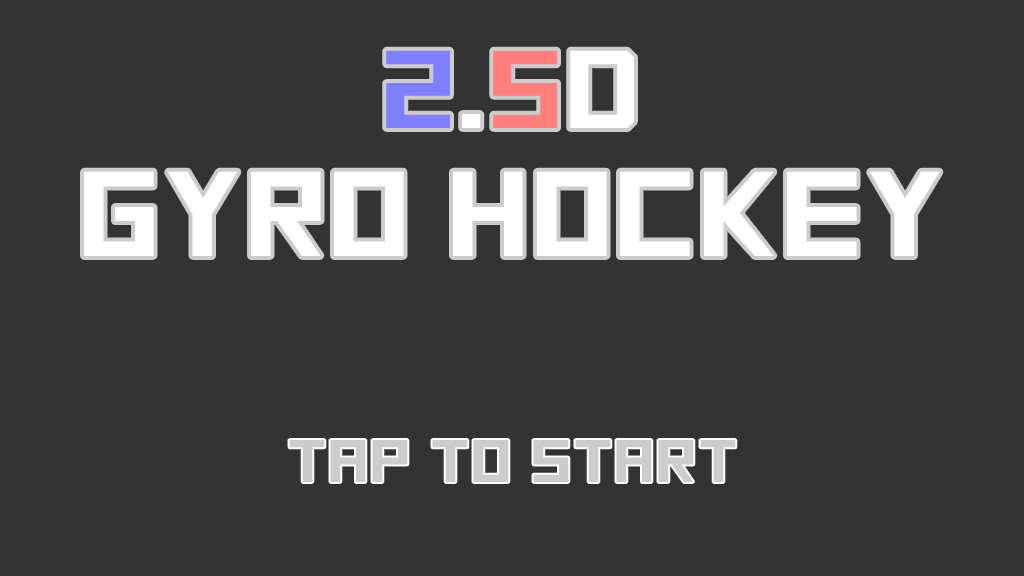
<style>
.page{position:relative;width:1024px;height:576px;background:#333333}
.page>*{position:absolute;margin:0}
.t1{font:110px "SquareFont";color:#7f7fff;scale:1.2 1}
.t2{font:110px "SquareFont";color:#ffffff;scale:1.2 1}
.t3{font:110px "SquareFont";color:#ff7f7f;scale:1.2 1}
.t4{font:120px "SquareFont";color:#ffffff;scale:1.2 1}
.t5{font:60px "SquareFont";color:#cccccc;scale:1.2 1}
</style>
<div class="page">
<p class="t1" style="left:386px;top:50px;width:248px;height:78px">2<span class="t2">.</span><span class="t3">5</span><span class="t2">d</span></p>
<p class="t4" style="left:84px;top:171px;width:856px;height:85px">Gyro hockey</p>
<p class="t5" style="left:289px;top:440px;width:447px;height:42px">TAP TO START</p>
</div>
